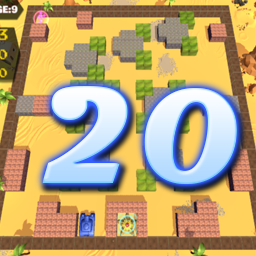
<style>
.page{position:relative;width:256px;height:256px}
.page>*{position:absolute;margin:0}
.t1{font:137.8px "Magneto-Bold";letter-spacing:0.02em}
</style>
<div class="page">
<p class="t1" style="left:42px;top:86px;width:195px;height:98px">20</p>
</div>
